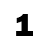
<style>
.page{position:relative;width:50px;height:50px;background:#ffffff}
.page>*{position:absolute;margin:0}
.t1{font:33.3px "FranklinGothic-Heavy";color:#000000}
</style>
<div class="page">
<p class="t1" style="left:16px;top:14px;width:17px;height:22px">1</p>
</div>
